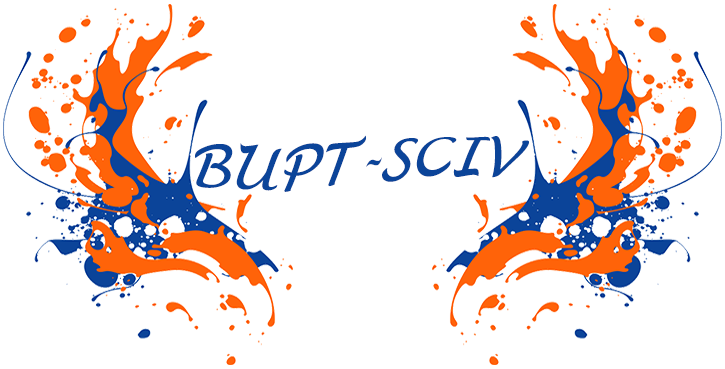
<style>
.page{position:relative;width:725px;height:369px;background:#ffffff}
.page>*{position:absolute;margin:0}
.t1{font:56px "LucidaHandwriting-Italic";color:#0b4499;font-style:italic}
</style>
<div class="page">
<p class="t1" style="left:195px;top:135px;width:334px;height:57px">BUPT-SCIV</p>
</div>
